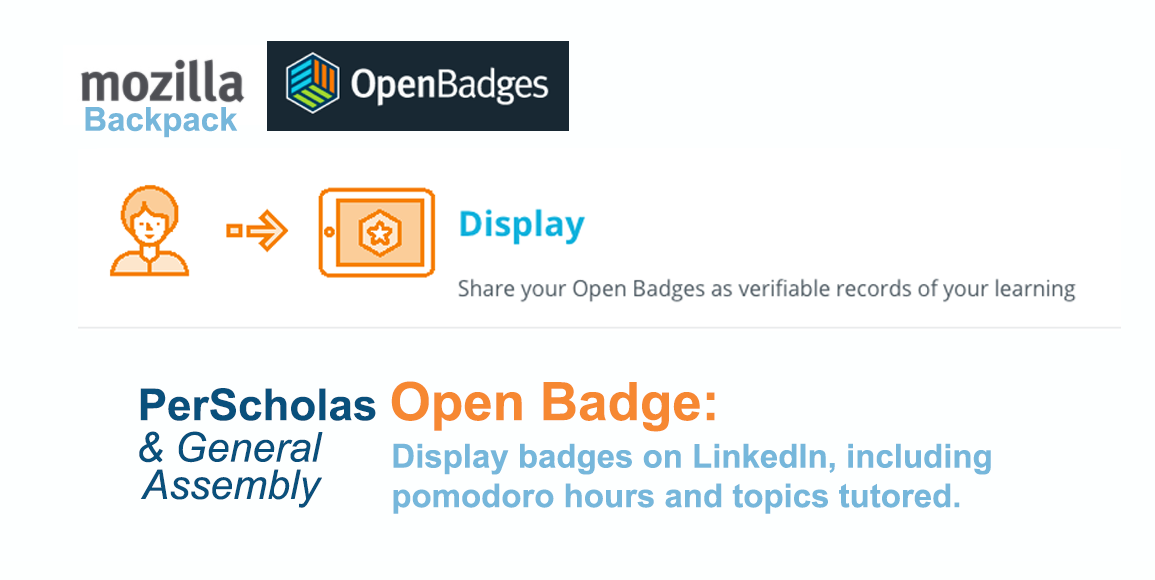
<style>
.page{position:relative;width:1155px;height:580px;background:#fdffff}
.page>*{position:absolute;margin:0}
.t1{font:33px "Arial-BoldMT";color:#76b7db}
.t2{font:53px "Arial-BoldMT";color:#f68832}
.t3{font:44px "Arial-BoldMT";color:#09507c}
.t4{font:41px "Arial-ItalicMT";color:#09507c}
</style>
<div class="page">
<p class="t1" style="left:85px;top:107px;width:153px;height:31px">Backpack</p>
<p class="t2" style="left:140px;top:381px;width:575px;height:51px"><span class="t3">PerScholas </span>Open Badge:</p>
<p class="t4" style="left:139px;top:431px;width:184px;height:32px">&amp; General</p>
<p class="t1" style="left:393px;top:443px;width:598px;height:71px">Display badges on LinkedIn, including <br>pomodoro hours and topics tutored.</p>
<p class="t4" style="left:140px;top:469px;width:182px;height:39px">Assembly</p>
</div>
